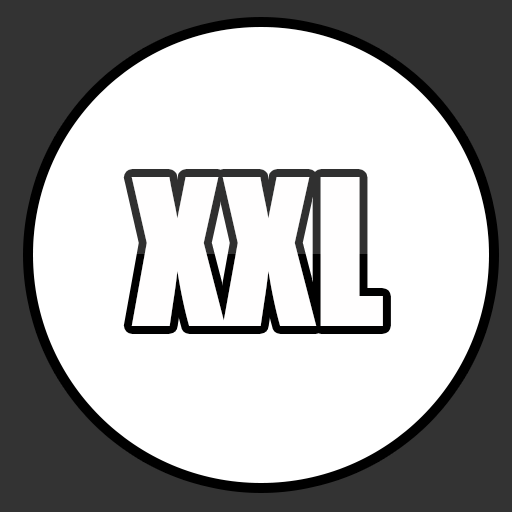
<style>
.page{position:relative;width:512px;height:512px;background:#ffffff}
.page>*{position:absolute;margin:0}
.t1{font:188px "Impact";color:#fffefe}
</style>
<div class="page">
<p class="t1" style="left:131px;top:177px;width:252px;height:149px">XXL</p>
</div>
